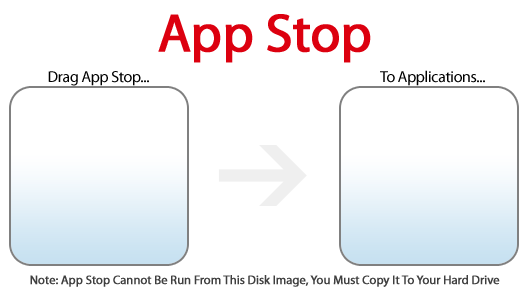
<style>
.page{position:relative;width:529px;height:295px;background:#ffffff}
.page>*{position:absolute;margin:0}
.t1{font:54.2px "MyriadPro-Regular";letter-spacing:-0.02em;color:#dc000f;font-weight:bold}
.t2{font:15.8px "MyriadPro-Regular";letter-spacing:-0.02em;color:#000000}
.t3{font:12.5px "MyriadPro-Regular";letter-spacing:-0.02em;color:#3f3f3f;font-weight:bold}
</style>
<div class="page">
<p class="t1" style="left:158px;top:14px;width:213px;height:49px">App Stop</p>
<p class="t2" style="left:48px;top:71px;width:101px;height:15px">Drag App Stop...</p>
<p class="t2" style="left:380px;top:70px;width:105px;height:16px">To Applications...</p>
<p class="t3" style="left:30px;top:275px;width:470px;height:12px">Note: App Stop Cannot Be Run From This Disk Image, You Must Copy It To Your Hard Drive</p>
</div>
